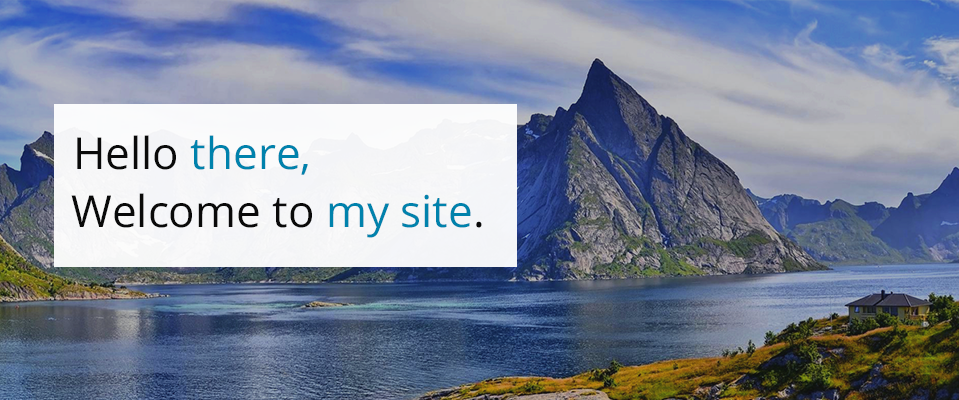
<style>
.page{position:relative;width:959px;height:400px}
.page>*{position:absolute;margin:0}
.t1{font:44px "OpenSans";color:#0082ac}
.t2{font:44px "OpenSans";color:#0a0a0a}
</style>
<div class="page">
<p class="t1" style="left:77px;top:135px;width:231px;height:40px"><span class="t2">Hello </span>there,</p>
<p class="t2" style="left:71px;top:193px;width:411px;height:45px">Welcome to <span class="t1">my site</span>.</p>
</div>
